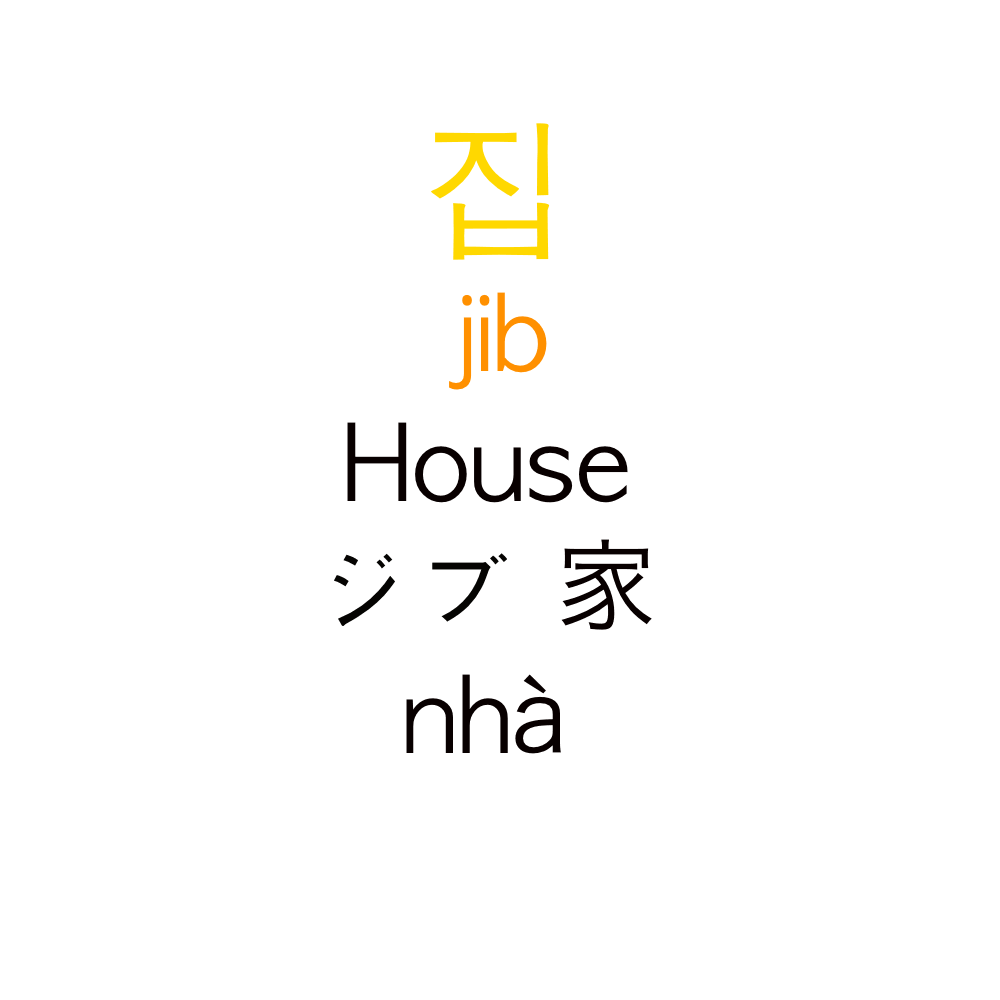
<style>
.page{position:relative;width:1000px;height:1000px;background:#ffffff}
.page>*{position:absolute;margin:0}
.t1{font:150px "AppleGothic";color:#ffd800}
.t2{font:100px "AppleGothic";color:#ff9000}
.t3{font:100px "AppleGothic";color:#080000}
.t4{font:100px "HiraKakuProN-W3";color:#080000}
.t5{font:100px "AppleGothic";color:#050402}
</style>
<div class="page">
<p class="t1" style="left:431px;top:123px;width:119px;height:137px">집</p>
<p class="t2" style="left:449px;top:292px;width:98px;height:98px">jib</p>
<p class="t3" style="left:347px;top:422px;width:281px;height:81px">House</p>
<p class="t4" style="left:561px;top:539px;width:91px;height:91px">家</p>
<p class="t5" style="left:334px;top:553px;width:173px;height:73px"><span class="t1"><br>  </span>ジブ</p>
<p class="t3" style="left:406px;top:674px;width:155px;height:80px">nh<span class="t4">à</span></p>
</div>
